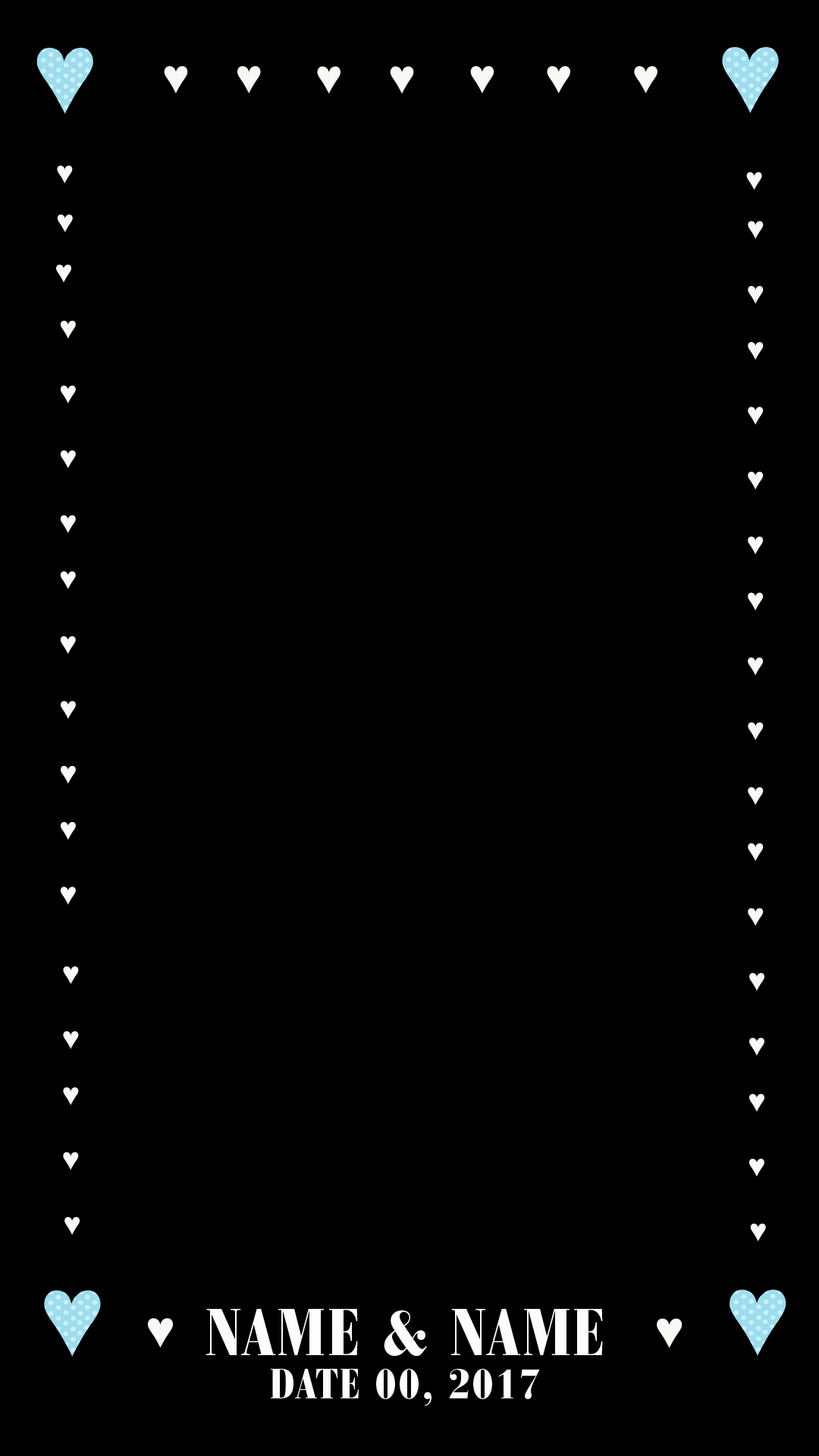
<style>
.page{position:relative;width:819px;height:1456px;background:#000000}
.page>*{position:absolute;margin:0}
.t1{font:65.2px "BauerBodoniStd-BlackCond";letter-spacing:0.05em;color:#fdfdfd}
.t2{font:41.7px "BauerBodoniStd-BlackCond";letter-spacing:0.05em;color:#fdfdfd}
</style>
<div class="page">
<p class="t1" style="left:206px;top:1309px;width:397px;height:47px">NAME &amp; NAME</p>
<p class="t2" style="left:271px;top:1369px;width:269px;height:37px">DATE 00, 2017</p>
</div>
